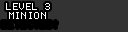
<style>
.page{position:relative;width:128px;height:32px;background:#333333}
.page>*{position:absolute;margin:0}
.t1{font:8px "Terminal";letter-spacing:0.05em;color:#ffffff}
</style>
<div class="page">
<p class="t1" style="left:6px;top:3px;width:44px;height:7px">LEVEL 3</p>
<p class="t1" style="left:9px;top:12px;width:37px;height:7px">MINION</p>
</div>
